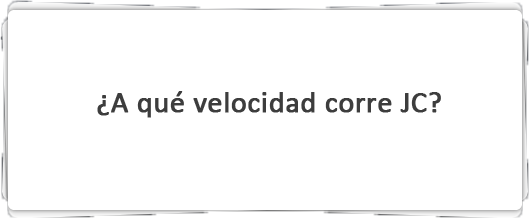
<style>
.page{position:relative;width:529px;height:218px;background:#ffffff}
.page>*{position:absolute;margin:0}
.t1{font:30px "Calibri";color:#3d3d3d;font-weight:bold}
</style>
<div class="page">
<p class="t1" style="left:97px;top:91px;width:344px;height:27px">¿A qué velocidad corre JC?</p>
</div>
